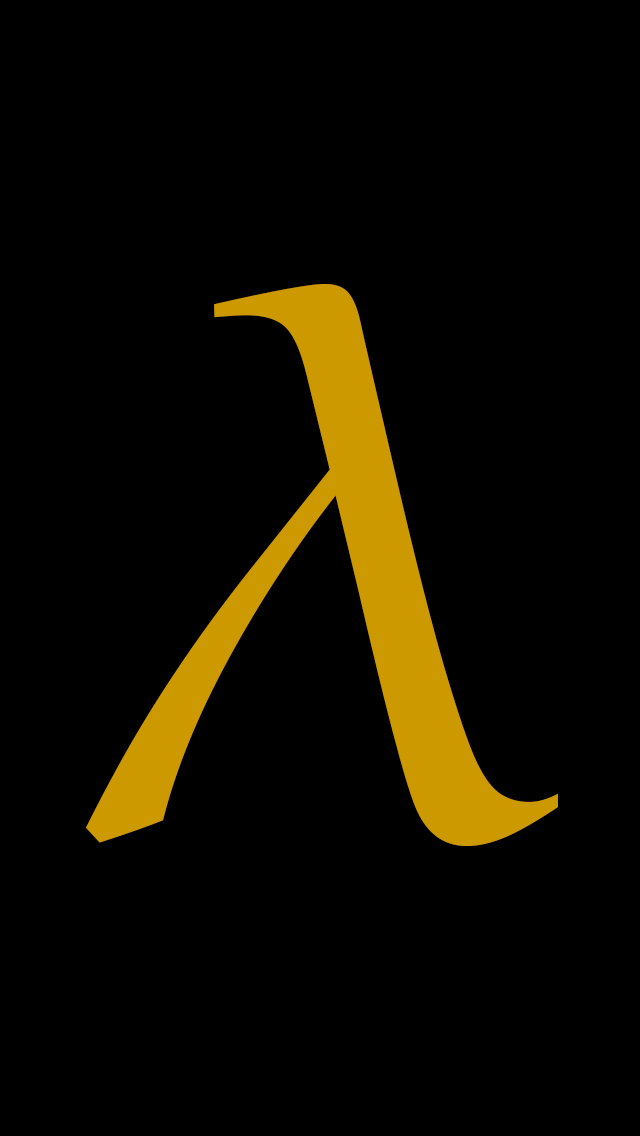
<style>
.page{position:relative;width:640px;height:1136px;background:#000000}
.page>*{position:absolute;margin:0}
.t1{font:800px "Palatino-Roman";letter-spacing:-0.1em;color:#cc9900}
</style>
<div class="page">
<p class="t1" style="left:86px;top:284px;width:472px;height:562px">λ</p>
</div>
